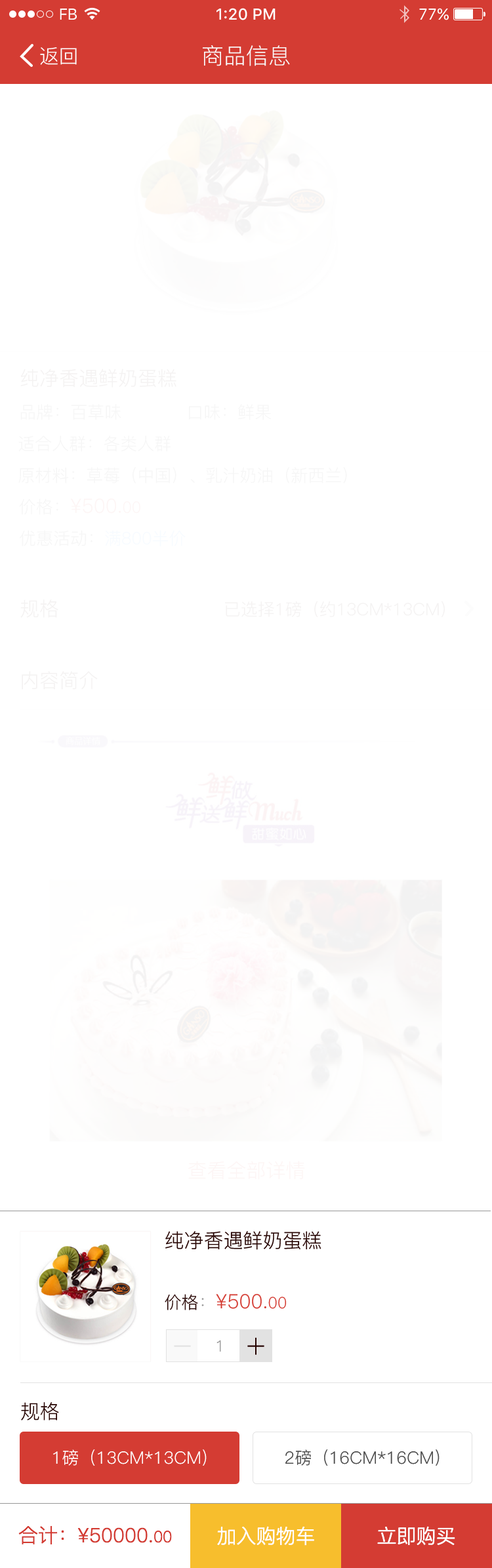
<style>
.page{position:relative;width:492px;height:1568px;background:#ffffff}
.page>*{position:absolute;margin:0}
.t1{font:15.7px "SFUIText-Regular";letter-spacing:-0.025em;color:#ffffff}
.t2{font:15.7px "SFUIText-Medium";color:#ffffff}
.t3{font:15.7px "SFUIText-Regular";color:#ffffff}
.t4{font:19.7px "PingFang-SC-Regular";color:#ffffff}
.t5{font:22.3px "PingFang-SC-Regular";color:#f9f9f9}
.t6{font:19.7px "PingFang-SC-Regular";color:#f4f2f2}
.t7{font:17.1px "PingFang-SC-Regular";color:#f6f6f6}
.t8{font:19.7px "PingFang-SC-Regular";color:#fdf5f5}
.t9{font:17.1px "PingFang-SC-Regular";color:#fdf5f5}
.t10{font:15.7px "PingFang-SC-Regular";color:#fdf5f5}
.t11{font:17.1px "PingFang-SC-Regular";color:#f6f8fa}
.t12{font:17.1px "PingFang-SC-Regular";color:#f4f2f2}
.t13{font:19.7px "PingFang-SC-Regular";color:#240200}
.t14{font:19.7px "PingFang-SC-Regular";color:#d43c33}
.t15{font:17.1px "PingFang-SC-Regular";color:#240200}
.t16{font:17.1px "PingFang-SC-Regular";color:#989898}
.t17{font:15.7px "PingFang-SC-Regular";color:#d43c33}
.t18{font:26.2px "PingFang-SC-Regular";color:#240200}
.t19{font:26.2px "PingFang-SC-Regular";color:#e2e2e2}
.t20{font:15.7px "PingFang-SC-Regular";color:#989898}
.t21{font:17.1px "PingFang-SC-Regular";color:#ffffff}
.t22{font:17.1px "PingFang-SC-Regular";color:#4c4c4c}
.t23{font:19.7px "PingFangSC-Light";color:#d43c33}
.t24{font:15.7px "PingFangSC-Light";color:#d43c33}
.t25{font:19.7px "PingFangSC-Light";color:#ffffff}
</style>
<div class="page">
<p class="t1" style="left:60px;top:9px;width:17px;height:11px">FB</p>
<p class="t2" style="left:216px;top:8px;width:59px;height:12px">1:20 PM</p>
<p class="t3" style="left:419px;top:8px;width:30px;height:12px">77%</p>
<p class="t4" style="left:40px;top:47px;width:37px;height:18px">返回</p>
<p class="t5" style="left:203px;top:45px;width:87px;height:21px">商品信息</p>
<p class="t6" style="left:20px;top:369px;width:156px;height:19px">纯净香遇鲜奶蛋糕</p>
<p class="t7" style="left:20px;top:404px;width:101px;height:16px">品牌：百草味</p>
<p class="t7" style="left:189px;top:404px;width:82px;height:16px">口味：鲜果</p>
<p class="t7" style="left:18px;top:435px;width:153px;height:17px">适合人群：各类人群</p>
<p class="t7" style="left:18px;top:467px;width:329px;height:16px">原材料：草莓（中国）、乳汁奶油（新西兰）</p>
<p class="t8" style="left:19px;top:498px;width:121px;height:17px"><span class="t9">价格：</span>¥500.<span class="t10">00</span></p>
<p class="t11" style="left:20px;top:530px;width:166px;height:16px">优惠活动：满800半价</p>
<p class="t6" style="left:20px;top:599px;width:38px;height:19px">规格</p>
<p class="t12" style="left:225px;top:601px;width:220px;height:16px">已选择1磅（约13CM*13CM）</p>
<p class="t6" style="left:22px;top:671px;width:76px;height:18px">内容简介</p>
<p class="t8" style="left:188px;top:1161px;width:117px;height:19px">查看全部详情</p>
<p class="t13" style="left:165px;top:1231px;width:156px;height:19px">纯净香遇鲜奶蛋糕</p>
<p class="t14" style="left:165px;top:1294px;width:122px;height:16px"><span class="t15">价格</span><span class="t16">：</span>¥500.<span class="t17">00</span></p>
<p class="t18" style="left:247px;top:1337px;width:17px;height:18px">＋</p>
<p class="t19" style="left:174px;top:1345px;width:17px;height:2px">－</p>
<p class="t20" style="left:216px;top:1340px;width:5px;height:12px">1</p>
<p class="t13" style="left:21px;top:1402px;width:38px;height:18px">规格</p>
<p class="t21" style="left:53px;top:1449px;width:154px;height:17px">1磅（13CM*13CM)</p>
<p class="t22" style="left:285px;top:1449px;width:154px;height:17px">2磅（16CM*16CM)</p>
<p class="t23" style="left:18px;top:1525px;width:154px;height:19px">合计：¥50000.<span class="t24">00</span></p>
<p class="t25" style="left:217px;top:1526px;width:97px;height:20px">加入购物车</p>
<p class="t25" style="left:377px;top:1526px;width:78px;height:19px">立即购买</p>
</div>
